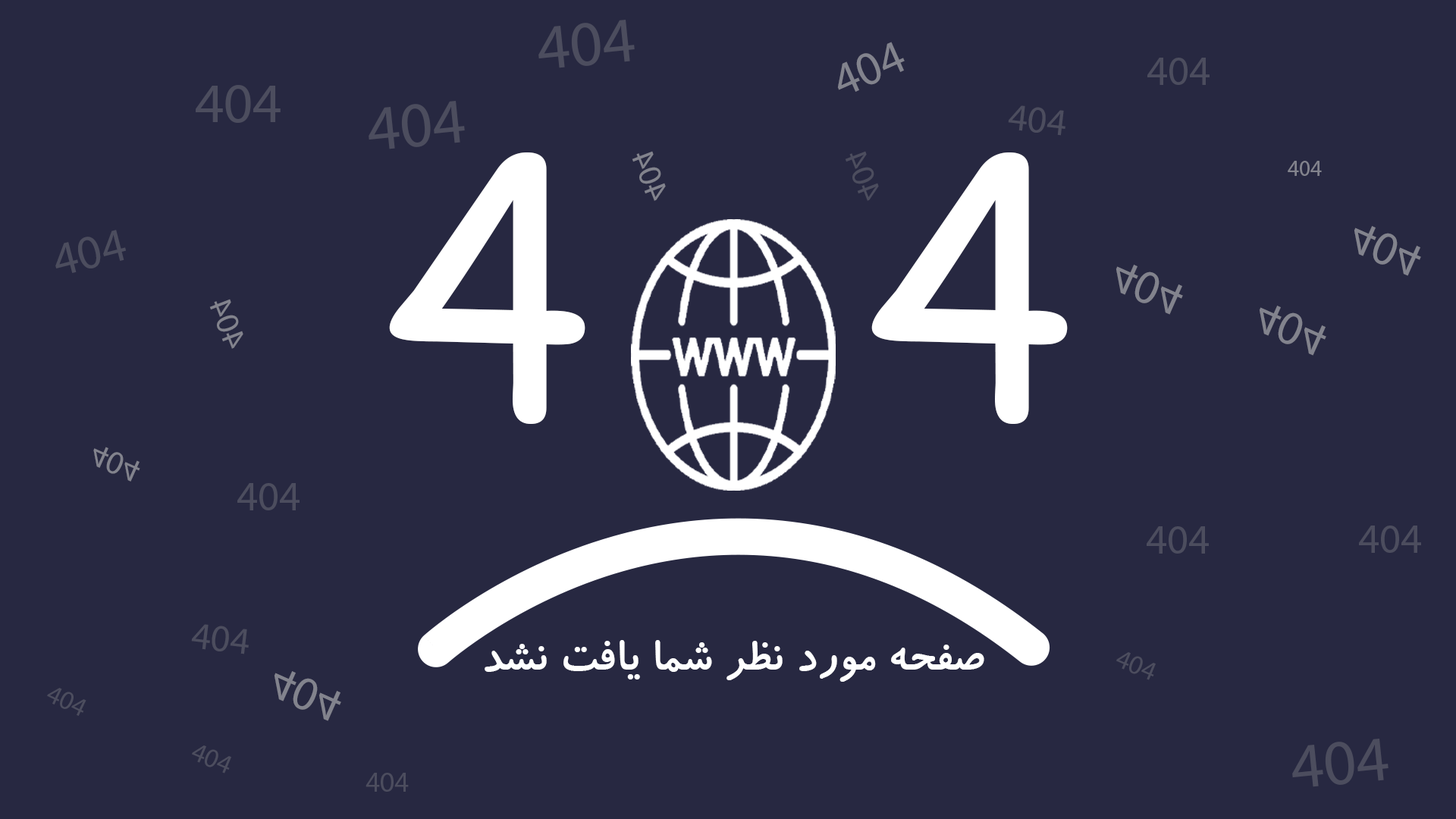
<style>
.page{position:relative;width:1456px;height:819px;background:#272841}
.page>*{position:absolute;margin:0}
.t1{font:89.5px "MyriadArabic-Regular";color:#4c4d5e}
.t2{font:66.7px "MyriadArabic-Regular";color:#82838d}
.t3{font:58.2px "MyriadArabic-Regular";color:#4c4d5e}
.t4{font:78.6px "MyriadArabic-Regular";color:#4c4d5e}
.t5{font:53.2px "MyriadArabic-Regular";color:#4c4d5e}
.t6{font:350.3px "ComicSansMS";color:#ffffff}
.t7{font:46.1px "MyriadArabic-Regular";color:#82838d}
.t8{font:46.1px "MyriadArabic-Regular";color:#4c4d5e}
.t9{font:31.4px "MyriadArabic-Regular";color:#82838d}
.t10{font:66.7px "MyriadArabic-Regular";color:#4c4d5e}
.t11{font:58.3px "MyriadArabic-Regular";color:#4c4d5e}
.t12{font:48.5px "IRKoodak";color:#ffffff}
.t13{font:37.6px "MyriadArabic-Regular";color:#4c4d5e}
.t14{font:37.1px "MyriadArabic-Regular";color:#4c4d5e}
.t15{font:39.4px "MyriadArabic-Regular";color:#4c4d5e}
</style>
<div class="page">
<p class="t1" style="left:538px;top:20px;width:97px;height:48px;rotate:-6deg">404</p>
<p class="t2" style="left:837px;top:42px;width:68px;height:50px;rotate:-24deg">404</p>
<p class="t3" style="left:1147px;top:58px;width:63px;height:27px">404</p>
<p class="t4" style="left:196px;top:85px;width:85px;height:38px">404</p>
<p class="t1" style="left:369px;top:101px;width:96px;height:48px;rotate:-6deg">404</p>
<p class="t5" style="left:1008px;top:105px;width:57px;height:31px;rotate:7deg">404</p>
<p class="t6" style="left:389px;top:152px;width:196px;height:272px">4</p>
<p class="t7" style="left:632px;top:151px;width:34px;height:50px;rotate:-111deg">404</p>
<p class="t8" style="left:845px;top:151px;width:34px;height:50px;rotate:-111deg">404</p>
<p class="t6" style="left:871px;top:152px;width:197px;height:272px">4</p>
<p class="t9" style="left:1288px;top:161px;width:34px;height:15px">404</p>
<p class="t10" style="left:55px;top:230px;width:71px;height:43px;rotate:-14deg">404</p>
<p class="t2" style="left:1354px;top:226px;width:67px;height:50px;rotate:24deg">404</p>
<p class="t2" style="left:1115px;top:265px;width:68px;height:50px;rotate:24deg">404</p>
<p class="t7" style="left:209px;top:299px;width:34px;height:50px;rotate:-111deg">404</p>
<p class="t2" style="left:1259px;top:306px;width:67px;height:50px;rotate:24deg">404</p>
<p class="t7" style="left:93px;top:447px;width:47px;height:35px;rotate:24deg">404</p>
<p class="t3" style="left:237px;top:483px;width:63px;height:27px">404</p>
<p class="t11" style="left:1147px;top:526px;width:62px;height:28px">404</p>
<p class="t11" style="left:1359px;top:526px;width:62px;height:27px">404</p>
<p class="t5" style="left:191px;top:624px;width:58px;height:30px;rotate:7deg">404</p>
<p class="t12" style="left:485px;top:640px;width:499px;height:42px">صفحه مورد نظر شما یافت نشد</p>
<p class="t13" style="left:1116px;top:652px;width:40px;height:28px;rotate:23deg">404</p>
<p class="t2" style="left:274px;top:671px;width:67px;height:50px;rotate:24deg">404</p>
<p class="t14" style="left:47px;top:688px;width:39px;height:28px;rotate:26deg">404</p>
<p class="t13" style="left:192px;top:745px;width:39px;height:28px;rotate:23deg">404</p>
<p class="t1" style="left:1292px;top:739px;width:96px;height:48px;rotate:-6deg">404</p>
<p class="t15" style="left:366px;top:773px;width:43px;height:19px">404</p>
</div>
